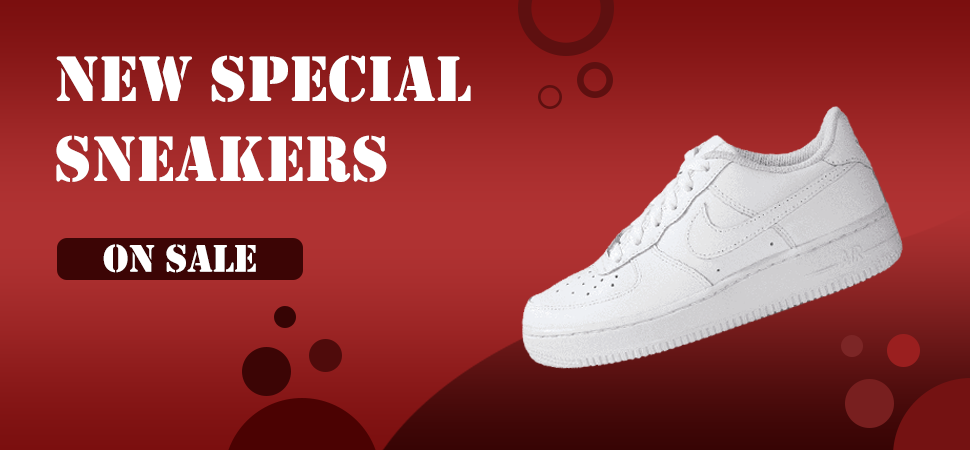
<style>
.page{position:relative;width:970px;height:450px}
.page>*{position:absolute;margin:0}
.t1{font:66.7px "Stencil";color:#ffffff}
.t2{font:40px "Stencil";color:#ffffff}
</style>
<div class="page">
<p class="t1" style="left:56px;top:55px;width:415px;height:127px">NEW SPECIAL Sneakers</p>
<p class="t2" style="left:103px;top:244px;width:153px;height:29px">On sale</p>
</div>
